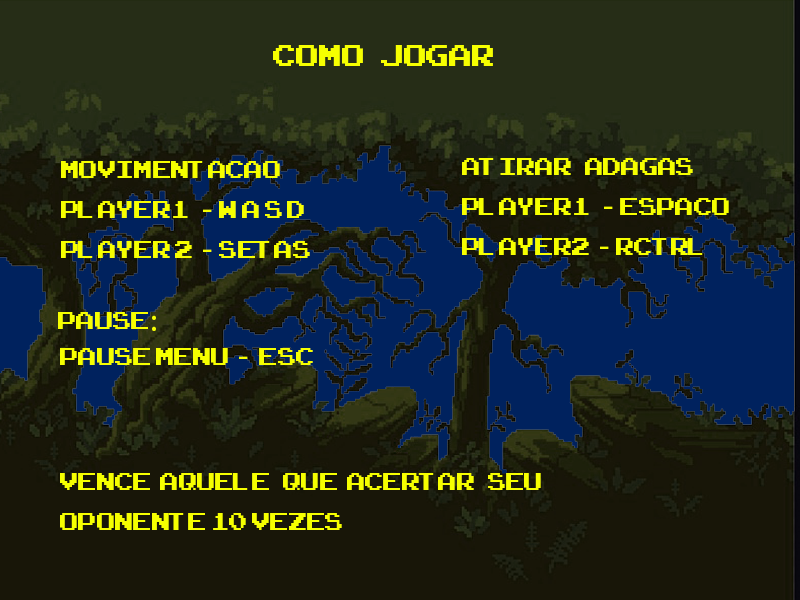
<style>
.page{position:relative;width:800px;height:600px}
.page>*{position:absolute;margin:0}
.t1{font:41.7px "ArcadeClassic";color:#f6ff00}
.t2{font:33.3px "ArcadeClassic";color:#f6ff00}
.t3{font:33.3px "MyriadPro-Regular";color:#f6ff00}
</style>
<div class="page">
<p class="t1" style="left:273px;top:45px;width:220px;height:21px">como   jogar</p>
<p class="t2" style="left:61px;top:161px;width:249px;height:97px">Movimentacao<br>player1   <span class="t3">- </span>w a s d<br>player 2  <span class="t3">- </span>setas<span class="t1"></span></p>
<p class="t2" style="left:462px;top:158px;width:267px;height:97px">Atirar   Adagas<br>Player1   <span class="t3">- </span>Espaco<br>Player2  <span class="t3">- </span>RCtrl</p>
<p class="t2" style="left:58px;top:312px;width:98px;height:19px">Pause<span class="t3">:</span></p>
<p class="t2" style="left:60px;top:348px;width:253px;height:17px">Pause menu  <span class="t3">- </span> esc</p>
<p class="t2" style="left:60px;top:473px;width:481px;height:57px"><span class="t3"><br></span>Vence  aquele   que  acertar   seu   <br>oponente 10 vezes</p>
</div>
